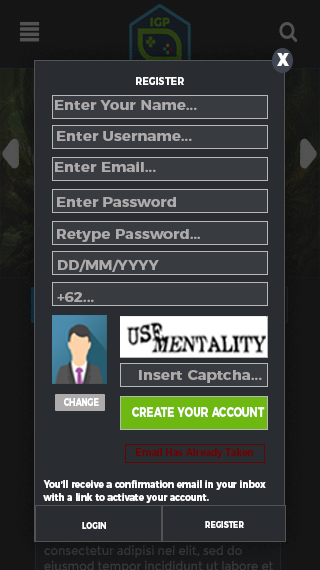
<style>
.page{position:relative;width:320px;height:570px;background:#292c31}
.page>*{position:absolute;margin:0}
.t1{font:17.8px "Montserrat-Black";color:#ffffff;scale:0.85 1}
.t2{font:11.1px "Montserrat-Bold";color:#ffffff;scale:0.85 1}
.t3{font:13.4px "Montserrat-Bold";color:#adabab;scale:1.12 1}
.t4{font:10.4px "Montserrat-Bold";color:#ffffff;scale:0.75 1}
.t5{font:13.9px "Montserrat-Bold";color:#ffffff;scale:0.75 1}
.t6{font:10.4px "Montserrat-Bold";color:#650606;scale:0.89 1}
.t7{font:10.4px "Montserrat-Bold";color:#ffffff;scale:0.85 1}
.t8{font:8.9px "Montserrat-Bold";color:#ffffff;scale:0.85 1}
</style>
<div class="page">
<p class="t1" style="left:277px;top:53px;width:12px;height:13px">X</p>
<p class="t2" style="left:136px;top:77px;width:48px;height:8px">REGISTER</p>
<p class="t3" style="left:55px;top:100px;width:142px;height:10px">Enter Your Name...</p>
<p class="t3" style="left:57px;top:131px;width:135px;height:10px">Enter Username...</p>
<p class="t3" style="left:55px;top:161px;width:101px;height:11px">Enter Email...</p>
<p class="t3" style="left:57px;top:197px;width:119px;height:10px">Enter Password</p>
<p class="t3" style="left:57px;top:229px;width:143px;height:13px">Retype Password...</p>
<p class="t3" style="left:58px;top:259px;width:101px;height:13px">DD/MM/YYYY</p>
<p class="t3" style="left:57px;top:292px;width:37px;height:10px">+62...</p>
<p class="t3" style="left:139px;top:370px;width:123px;height:13px">Insert Captcha...</p>
<p class="t4" style="left:64px;top:398px;width:35px;height:8px">CHANGE</p>
<p class="t5" style="left:132px;top:407px;width:133px;height:10px">CREATE YOUR ACCOUNT</p>
<p class="t6" style="left:136px;top:448px;width:117px;height:10px">Email Has Already Taken</p>
<p class="t7" style="left:43px;top:480px;width:223px;height:23px">You’ll receive a confirmation email in your inbox with a link to activate your account.</p>
<p class="t8" style="left:205px;top:521px;width:39px;height:7px">REGISTER</p>
<p class="t8" style="left:82px;top:522px;width:24px;height:7px">LOGIN</p>
</div>
